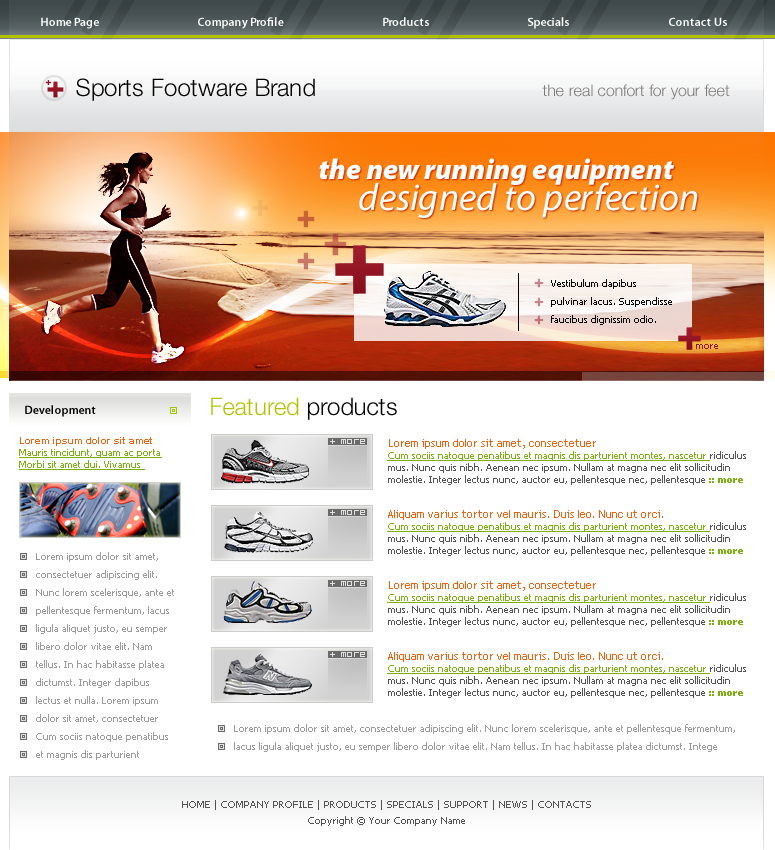
<style>
.page{position:relative;width:775px;height:850px;background:#ffffff}
.page>*{position:absolute;margin:0}
.t1{font:12px "MyriadPro-Semibold";color:#ffffff}
.t2{font:24px "HelveticaNeueLTPro-Lt";color:#000000}
.t3{font:16px "HelveticaNeueLTPro-Lt";color:#777778}
.t4{font:29px "MyriadPro-BlackIt";color:#ffffff}
.t5{font:38px "MyriadPro-It";color:#ffffff}
.t6{font:10px/18px "Tahoma";color:#000000}
.t7{font:10px "Tahoma";color:#911422}
.t8{font:24px "HelveticaNeueLTPro-Lt";color:#b2c200}
.t9{font:12px "MyriadPro-Semibold";color:#000000}
.t10{font:10px/12px "Tahoma";color:#7baf10;text-decoration:underline}
.t11{font:10px/14px "Arial-BoldMT";color:#f1610b}
.t12{font:9px "BitLow";color:#e1e1e1}
.t13{font:10px/12px "Tahoma";color:#535353}
.t14{font:11px/12px "TrebuchetMS";color:#f1610b}
.t15{font:10px/12px "Tahoma-Bold";color:#7baf10}
.t16{font:10px/18px "Tahoma";color:#9b9b9b}
.t17{font:10px/16px "Tahoma";color:#535353}
</style>
<div class="page">
<p class="t1" style="left:41px;top:17px;width:58px;height:12px">Home Page</p>
<p class="t1" style="left:198px;top:17px;width:86px;height:12px">Company Profile</p>
<p class="t1" style="left:383px;top:17px;width:46px;height:9px">Products</p>
<p class="t1" style="left:528px;top:17px;width:41px;height:12px">Specials</p>
<p class="t1" style="left:669px;top:17px;width:58px;height:9px">Contact Us</p>
<p class="t2" style="left:76px;top:78px;width:239px;height:23px">Sports Footware Brand</p>
<p class="t3" style="left:542px;top:84px;width:188px;height:16px">the real confort for your feet</p>
<p class="t4" style="left:319px;top:158px;width:355px;height:27px">the new running equipment</p>
<p class="t5" style="left:359px;top:182px;width:339px;height:36px">designed to perfection</p>
<p class="t6" style="left:551px;top:279px;width:121px;height:46px">Vestibulum dapibus pulvinar lacus. Suspendisse faucibus dignissim odio.</p>
<p class="t7" style="left:696px;top:344px;width:22px;height:5px">more</p>
<p class="t8" style="left:211px;top:397px;width:186px;height:23px">Featured <span class="t2">products</span></p>
<p class="t9" style="left:25px;top:405px;width:71px;height:12px">Development</p>
<p class="t10" style="left:19px;top:437px;width:143px;height:33px"><span class="t11">Lorem ipsum dolor sit amet<br></span>Mauris tincidunt, quam ac porta Morbi sit amet dui. Vivamus</p>
<p class="t12" style="left:330px;top:439px;width:35px;height:5px">+ MORE</p>
<p class="t13" style="left:387px;top:439px;width:359px;height:46px"><span class="t14">Lorem ipsum dolor sit amet, consectetuer <br></span><span class="t10">Cum sociis natoque penatibus et magnis dis parturient montes, nascetur </span>ridiculus mus. Nunc quis nibh. Aenean nec ipsum. Nullam at magna nec elit sollicitudin molestie. Integer lectus nunc, auctor eu, pellentesque nec, pellentesque <span class="t15">:: more</span></p>
<p class="t12" style="left:330px;top:510px;width:35px;height:5px">+ MORE</p>
<p class="t13" style="left:387px;top:510px;width:359px;height:46px"><span class="t14">Aliquam varius tortor vel mauris. Duis leo. Nunc ut orci.  <br></span><span class="t10">Cum sociis natoque penatibus et magnis dis parturient montes, nascetur </span>ridiculus mus. Nunc quis nibh. Aenean nec ipsum. Nullam at magna nec elit sollicitudin molestie. Integer lectus nunc, auctor eu, pellentesque nec, pellentesque <span class="t15">:: more</span></p>
<p class="t16" style="left:36px;top:552px;width:138px;height:208px">Lorem ipsum dolor sit amet, consectetuer adipiscing elit. Nunc lorem scelerisque, ante et pellentesque fermentum, lacus ligula aliquet justo, eu semper libero dolor vitae elit. Nam tellus. In hac habitasse platea dictumst. Integer dapibus lectus et nulla. Lorem ipsum dolor sit amet, consectetuer Cum sociis natoque penatibus et magnis dis parturient</p>
<p class="t12" style="left:330px;top:581px;width:35px;height:5px">+ MORE</p>
<p class="t13" style="left:387px;top:581px;width:359px;height:46px"><span class="t14">Lorem ipsum dolor sit amet, consectetuer <br></span><span class="t10">Cum sociis natoque penatibus et magnis dis parturient montes, nascetur </span>ridiculus mus. Nunc quis nibh. Aenean nec ipsum. Nullam at magna nec elit sollicitudin molestie. Integer lectus nunc, auctor eu, pellentesque nec, pellentesque <span class="t15">:: more</span></p>
<p class="t12" style="left:330px;top:652px;width:35px;height:5px">+ MORE</p>
<p class="t13" style="left:387px;top:652px;width:359px;height:46px"><span class="t14">Aliquam varius tortor vel mauris. Duis leo. Nunc ut orci. <br></span><span class="t10">Cum sociis natoque penatibus et magnis dis parturient montes, nascetur </span>ridiculus mus. Nunc quis nibh. Aenean nec ipsum. Nullam at magna nec elit sollicitudin molestie. Integer lectus nunc, auctor eu, pellentesque nec, pellentesque <span class="t15">:: more</span></p>
<p class="t16" style="left:234px;top:724px;width:501px;height:28px">Lorem ipsum dolor sit amet, consectetuer adipiscing elit. Nunc lorem scelerisque, ante et pellentesque fermentum, lacus ligula aliquet justo, eu semper libero dolor vitae elit. Nam tellus. In hac habitasse platea dictumst. Intege</p>
<p class="t17" style="left:182px;top:800px;width:409px;height:26px;text-align:center">HOME | COMPANY PROFILE | PRODUCTS | SPECIALS | SUPPORT | NEWS | CONTACTS<br>Copyright © Your Company Name</p>
</div>
